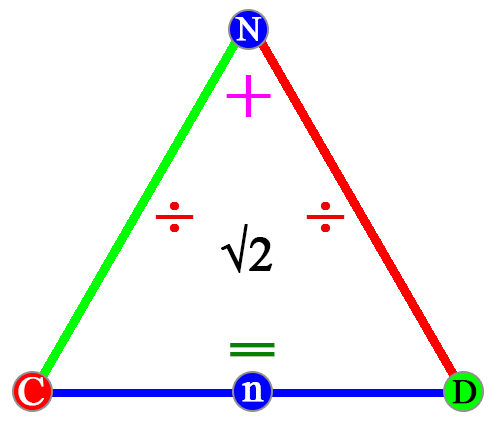
<style>
.page{position:relative;width:497px;height:424px;background:#ffffff}
.page>*{position:absolute;margin:0}
.t1{font:33.9px "TimesNewRomanPSMT";color:#ffffff;font-weight:bold}
.t2{font:79.6px "TimesNewRomanPSMT";color:#ff00ff;font-weight:bold}
.t3{font:82.6px "BaskOldFace";letter-spacing:0.04em;color:#e90505;font-weight:bold}
.t4{font:50px "TimesNewRomanPSMT";color:#000000;font-weight:bold}
.t5{font:97.7px "BaskOldFace";letter-spacing:0.04em;color:#087f05;font-weight:bold}
.t6{font:41.3px "TimesNewRomanPSMT";color:#ffffff;font-weight:bold}
.t7{font:34.2px "TimesNewRomanPSMT";color:#000000;font-weight:bold}
</style>
<div class="page">
<p class="t1" style="left:235px;top:17px;width:27px;height:24px">N</p>
<p class="t2" style="left:226px;top:75px;width:45px;height:42px">+</p>
<p class="t3" style="left:155px;top:202px;width:39px;height:30px">÷</p>
<p class="t3" style="left:306px;top:202px;width:39px;height:30px">÷</p>
<p class="t4" style="left:221px;top:224px;width:52px;height:49px">√2</p>
<p class="t5" style="left:230px;top:343px;width:45px;height:14px">=</p>
<p class="t6" style="left:18px;top:377px;width:26px;height:29px">C</p>
<p class="t6" style="left:242px;top:382px;width:22px;height:20px">n</p>
<p class="t7" style="left:452px;top:380px;width:25px;height:24px">D</p>
</div>
